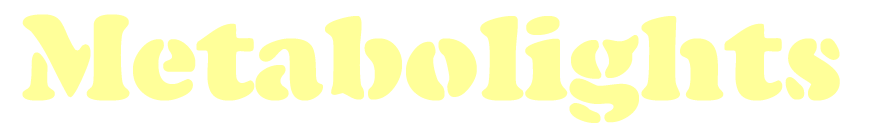
<style>
.page{position:relative;width:873px;height:130px;background:#ffffff}
.page>*{position:absolute;margin:0}
.t1{font:124.5px "Ellis";color:#ffff99}
</style>
<div class="page">
<p class="t1" style="left:22px;top:14px;width:818px;height:109px">Metabolights</p>
</div>
